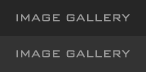
<style>
.page{position:relative;width:146px;height:72px;background:#333333}
.page>*{position:absolute;margin:0}
.t1{font:13px "BankGothicBT-Light";color:#999999}
</style>
<div class="page">
<p class="t1" style="left:16px;top:14px;width:114px;height:8px">IMAGE GALLERY</p>
<p class="t1" style="left:16px;top:50px;width:114px;height:8px">IMAGE GALLERY</p>
</div>
